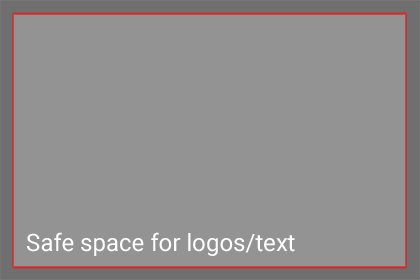
<style>
.page{position:relative;width:420px;height:280px;background:#939393}
.page>*{position:absolute;margin:0}
.t1{font:24px "Roboto-Regular";color:#ffffff}
</style>
<div class="page">
<p class="t1" style="left:27px;top:232px;width:268px;height:24px">Safe space for logos/text</p>
</div>
